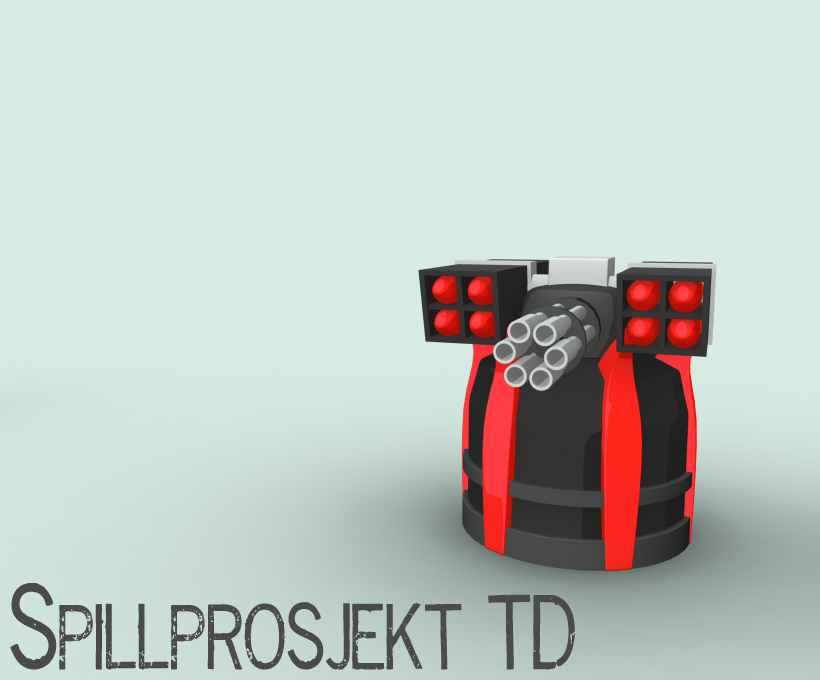
<style>
.page{position:relative;width:820px;height:680px;background:#d6ebe4}
.page>*{position:absolute;margin:0}
.t1{font:70px "RepriseStamp";color:#4a4a4a;text-transform:uppercase;scale:0.8 1}
.t2{font:90px "RepriseStamp";color:#4a4a4a;text-transform:uppercase;scale:0.8 1}
.t3{font:80px "RepriseStamp";color:#4a4a4a;text-transform:uppercase;scale:0.8 1}
</style>
<div class="page">
<p class="t1" style="left:10px;top:583px;width:565px;height:87px"><span class="t2">S</span>pillprosjekt <span class="t3">TD</span></p>
</div>
